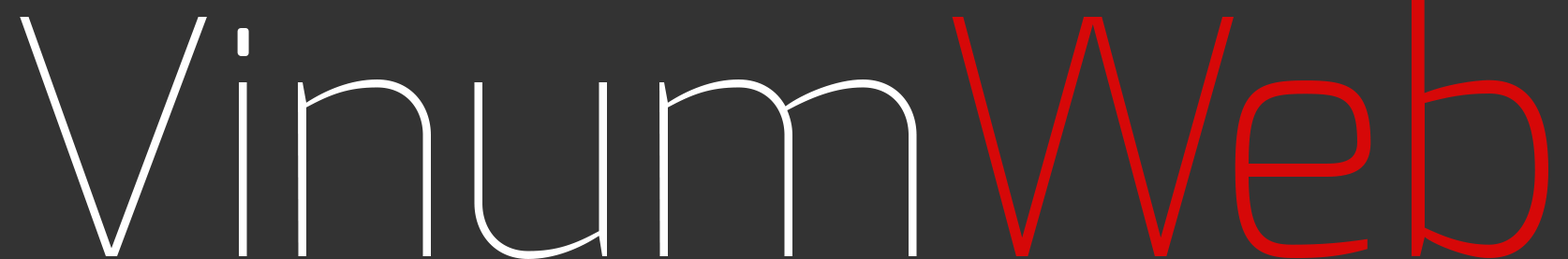
<style>
.page{position:relative;width:1568px;height:259px;background:#333333}
.page>*{position:absolute;margin:0}
.t1{font:327.8px "Exo-Thin";color:#ffffff}
.t2{font:327.8px "Exo-ExtraLight";letter-spacing:-0.1em;color:#d60808;scale:0.75 1}
.t3{font:327.8px "Exo-ExtraLight";color:#d60808}
</style>
<div class="page">
<p class="t1" style="left:20px;top:0px;width:1528px;height:259px">Vinum<span class="t2">VV</span><span class="t3">eb</span></p>
</div>
